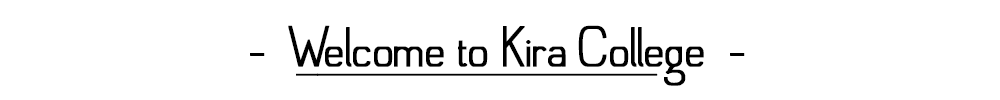
<style>
.page{position:relative;width:1000px;height:100px;background:#ffffff}
.page>*{position:absolute;margin:0}
.t1{font:57px "Anglean";letter-spacing:-0.08em;color:#000000;font-weight:bold}
.t2{font:57px "Anglean";letter-spacing:-0.2em;color:#000000;font-weight:bold}
</style>
<div class="page">
<p class="t1" style="left:250px;top:25px;width:495px;height:61px">-  Welcome to Kira College  -</p>
<p class="t2" style="left:296px;top:73px;width:362px;height:3px">_________________</p>
</div>
